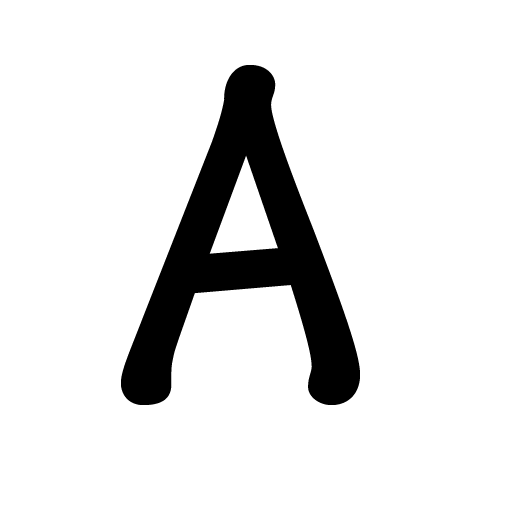
<style>
.page{position:relative;width:512px;height:512px;background:#ffffff}
.page>*{position:absolute;margin:0}
.t1{font:508.5px "TektonPro-BoldCond";color:#000000}
</style>
<div class="page">
<p class="t1" style="left:121px;top:65px;width:239px;height:340px">A</p>
</div>
